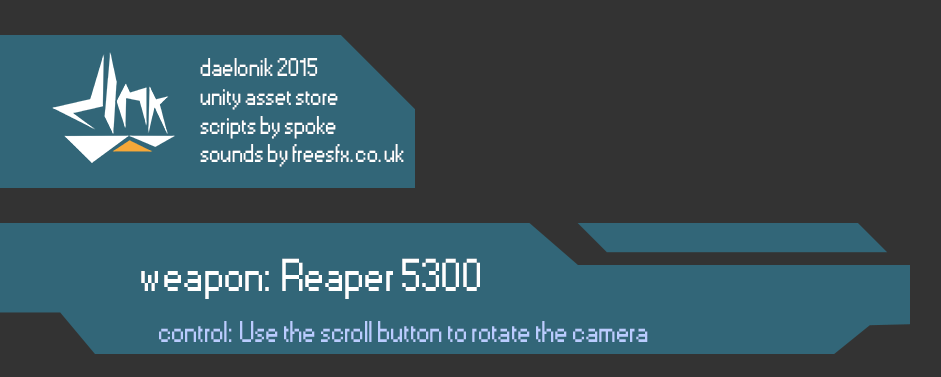
<style>
.page{position:relative;width:941px;height:377px;background:#333333}
.page>*{position:absolute;margin:0}
.t1{font:24px "Small Fonts";color:#ffffff}
.t2{font:42.9px "Small Fonts";color:#ffffff}
.t3{font:28.1px "Small Fonts";color:#baccff}
</style>
<div class="page">
<p class="t1" style="left:200px;top:58px;width:204px;height:109px">daelonik 2015<br>unity asset store<br>scripts by spoke<br>sounds by freesfx.co.uk</p>
<p class="t2" style="left:141px;top:258px;width:339px;height:41px">weapon: Reaper 5300</p>
<p class="t3" style="left:159px;top:321px;width:489px;height:21px">control: Use the scroll button to rotate the camera</p>
</div>
